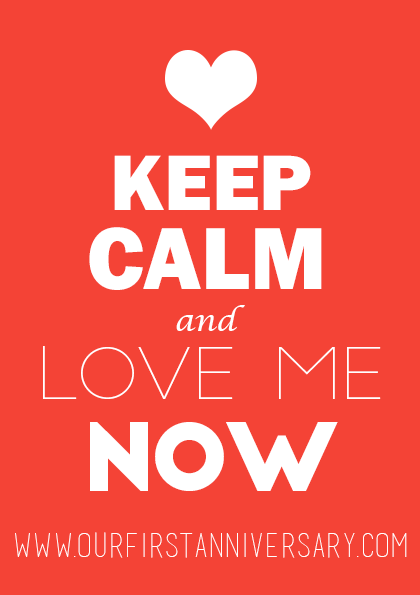
<style>
.page{position:relative;width:420px;height:595px;background:#f44336}
.page>*{position:absolute;margin:0}
.t1{font:81.6px "FranklinGothic-Heavy";color:#ffffff}
.t2{font:91.2px "FranklinGothic-Heavy";color:#ffffff}
.t3{font:30px "LucidaCalligraphy-Italic";color:#ffffff}
.t4{font:70px "SlimJoe";color:#ffffff}
.t5{font:91.3px "BigJohn";color:#ffffff}
.t6{font:33.3px "basictitlefont";color:#ffffff}
</style>
<div class="page">
<p class="t1" style="left:114px;top:155px;width:197px;height:55px">KEEP</p>
<p class="t2" style="left:89px;top:227px;width:233px;height:63px">CALM</p>
<p class="t3" style="left:176px;top:305px;width:69px;height:26px">and</p>
<p class="t4" style="left:43px;top:346px;width:338px;height:53px">love me</p>
<p class="t5" style="left:90px;top:422px;width:248px;height:69px">now</p>
<p class="t6" style="left:15px;top:532px;width:392px;height:26px">www.ourFirstAnniversary.com</p>
</div>
